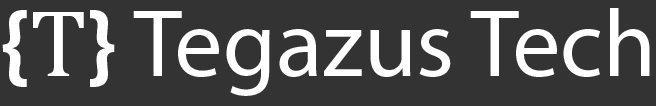
<style>
.page{position:relative;width:656px;height:106px;background:#333333}
.page>*{position:absolute;margin:0}
.t1{font:96px "MyriadPro-Regular";color:#ffffff}
.t2{font:96px "MyriadPro-Bold";color:#ffffff}
.t3{font:96px "CambriaMath";color:#ffffff}
</style>
<div class="page">
<p class="t1" style="left:2px;top:8px;width:648px;height:88px"><span class="t2">{</span><span class="t3">T</span><span class="t2">}</span> Tegazus Tech</p>
</div>
